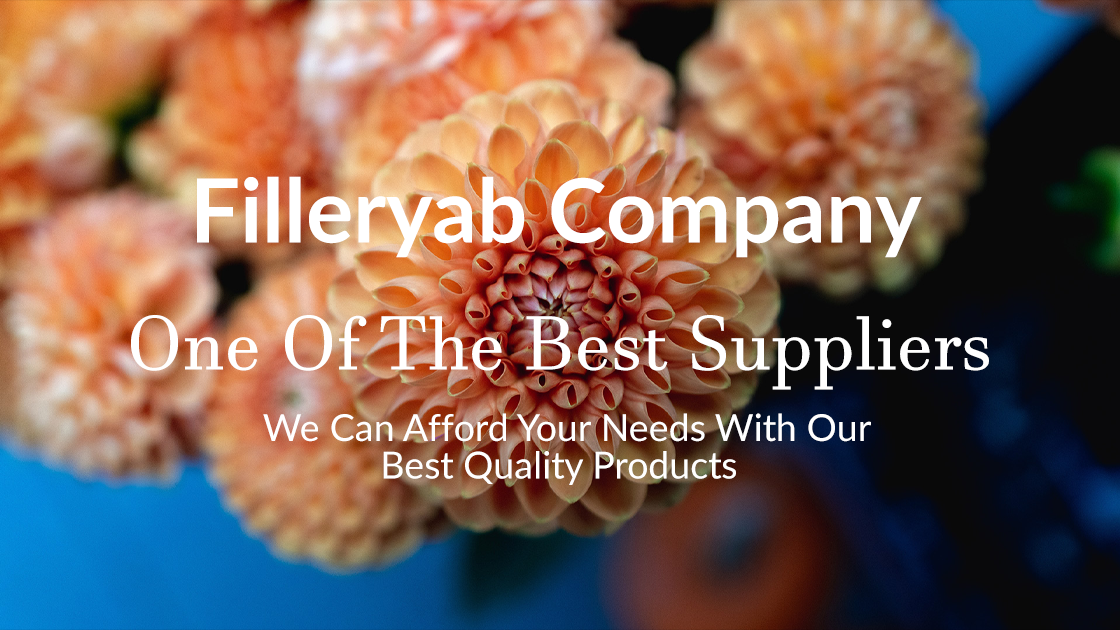
<style>
.page{position:relative;width:1120px;height:630px}
.page>*{position:absolute;margin:0}
.t1{font:88.5px "Lato-Bold";color:#ffffff}
.t2{font:75px "JavaneseText";color:#ffffff}
.t3{font:37.5px/37.5px "Lato-Regular";color:#ffffff}
</style>
<div class="page">
<p class="t1" style="left:197px;top:176px;width:725px;height:82px">Filleryab Company</p>
<p class="t2" style="left:131px;top:315px;width:858px;height:75px">One Of The Best Suppliers</p>
<p class="t3" style="left:263px;top:413px;width:608px;height:72px;text-align:center">We Can Afford Your Needs With Our <br>Best Quality Products</p>
</div>
